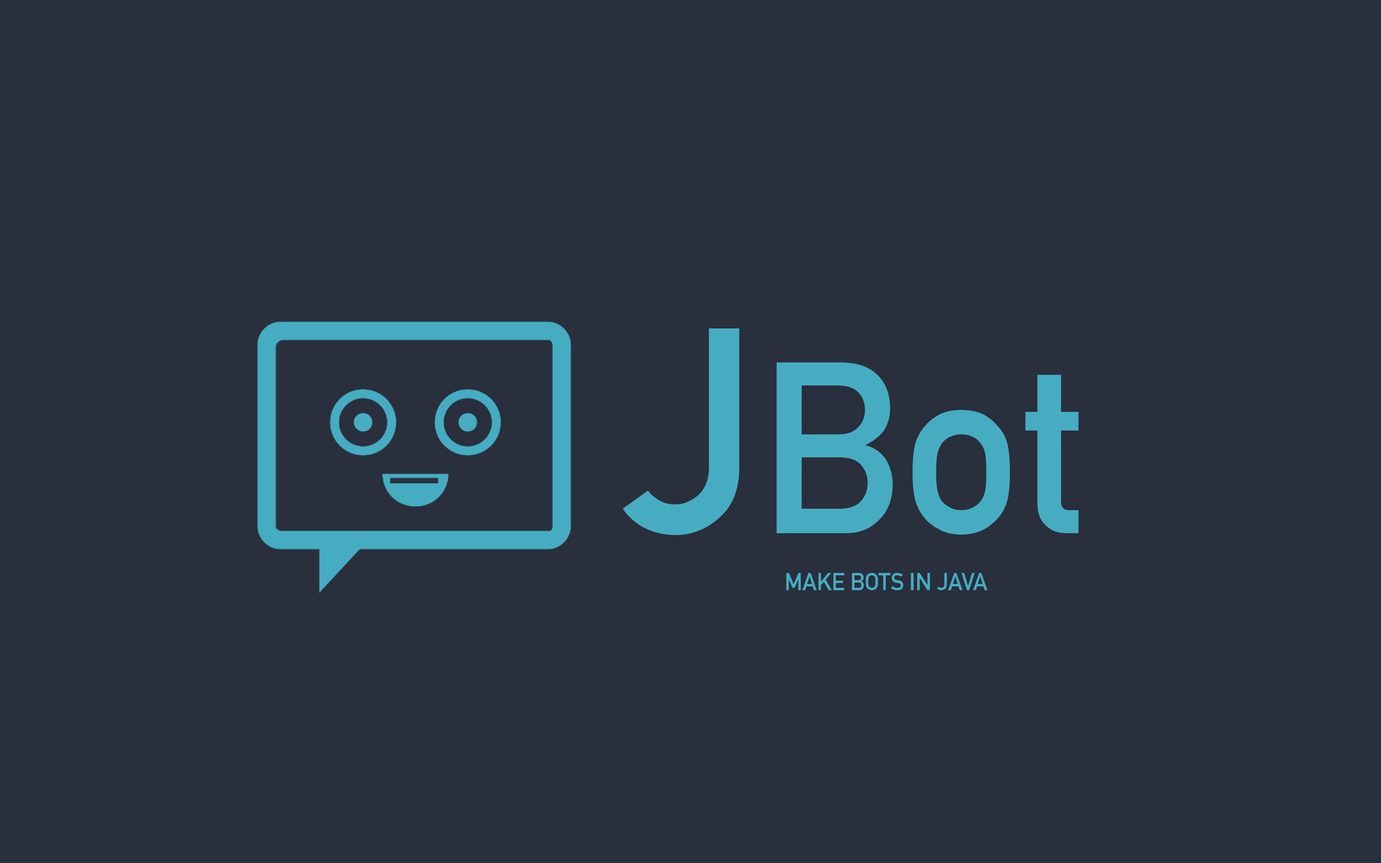
<style>
.page{position:relative;width:1381px;height:863px;background:#292f3d}
.page>*{position:absolute;margin:0}
.t1{font:239.8px "DINAlternate-Bold";letter-spacing:-0.01em;color:#46acc2}
.t2{font:287.8px "DINAlternate-Bold";letter-spacing:-0.01em;color:#46acc2}
.t3{font:24px "DINAlternate-Bold";letter-spacing:-0.01em;color:#46acc2}
</style>
<div class="page">
<p class="t1" style="left:623px;top:329px;width:456px;height:206px"><span class="t2">J</span>Bot</p>
<p class="t3" style="left:786px;top:573px;width:202px;height:17px">MAKE BOTS IN JAVA</p>
</div>
